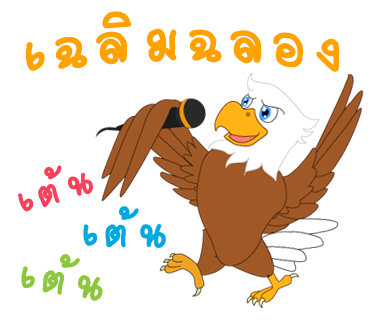
<style>
.page{position:relative;width:370px;height:320px;background:#ffffff}
.page>*{position:absolute;margin:0}
.t1{font:89px "2005_iannnnnMTV";letter-spacing:0.075em;color:#ffa200;scale:1.06 1}
.t2{font:59px "2005_iannnnnMTV";letter-spacing:0.075em;color:#fa405a;scale:1.06 1}
.t3{font:65px "2005_iannnnnMTV";letter-spacing:0.075em;color:#00a8e1;scale:1.06 1}
.t4{font:65px "2005_iannnnnMTV";letter-spacing:0.075em;color:#8dc63f;scale:1.06 1}
</style>
<div class="page">
<p class="t1" style="left:26px;top:11px;width:314px;height:61px">เฉลิมฉลอง</p>
<p class="t2" style="left:18px;top:165px;width:75px;height:47px;rotate:-18deg">เต้น</p>
<p class="t3" style="left:83px;top:206px;width:83px;height:42px">เต้น</p>
<p class="t4" style="left:21px;top:254px;width:82px;height:47px;rotate:9deg">เต้น</p>
</div>
